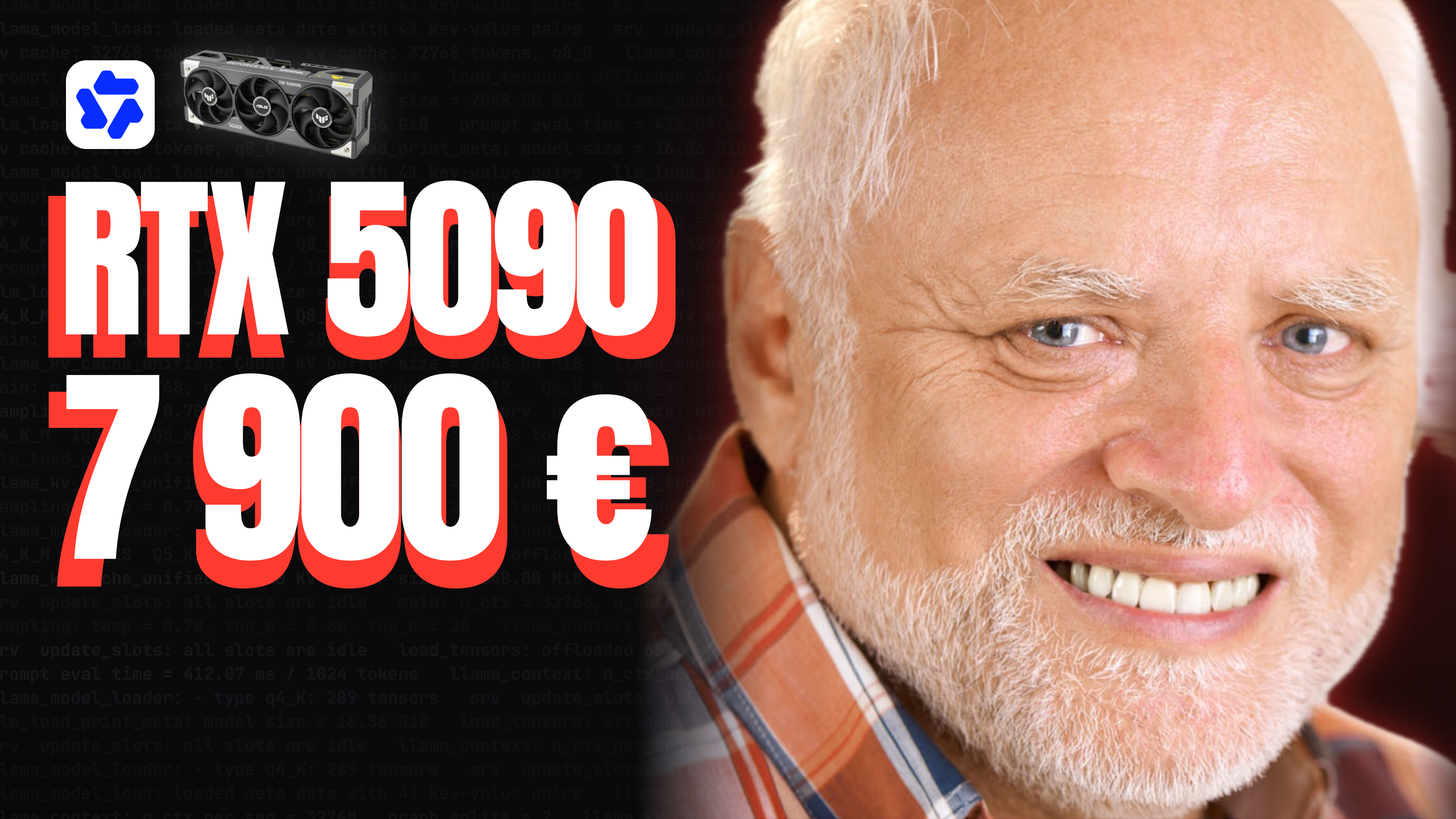
<style>
.page{position:relative;width:1456px;height:819px}
.page>*{position:absolute;margin:0}
.t1{font:177.4px "Anton-Regular";letter-spacing:-0.025em;color:#ffffff}
.t2{font:188.1px "Anton-Regular";letter-spacing:-0.025em}
.t3{font:213.8px "Anton-Regular";letter-spacing:-0.025em;color:#ffffff}
.t4{font:226.7px "Anton-Regular";letter-spacing:-0.025em}
</style>
<div class="page">
<p class="t1" style="left:65px;top:180px;width:593px;height:157px">RTX 5090</p>
<p class="t2" style="left:48px;top:194px;width:628px;height:167px">RTX 5090</p>
<p class="t3" style="left:66px;top:373px;width:586px;height:188px">7 900 €</p>
<p class="t4" style="left:48px;top:390px;width:622px;height:199px">7 900 €</p>
</div>
